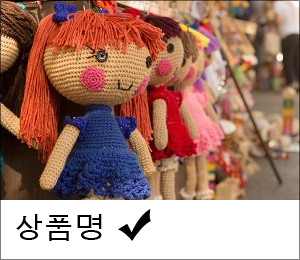
<style>
.page{position:relative;width:300px;height:260px;background:#ffffff}
.page>*{position:absolute;margin:0}
.t1{font:30px "ArialUnicodeMS";color:#000000}
</style>
<div class="page">
<p class="t1" style="left:16px;top:214px;width:86px;height:27px">상품명</p>
</div>
